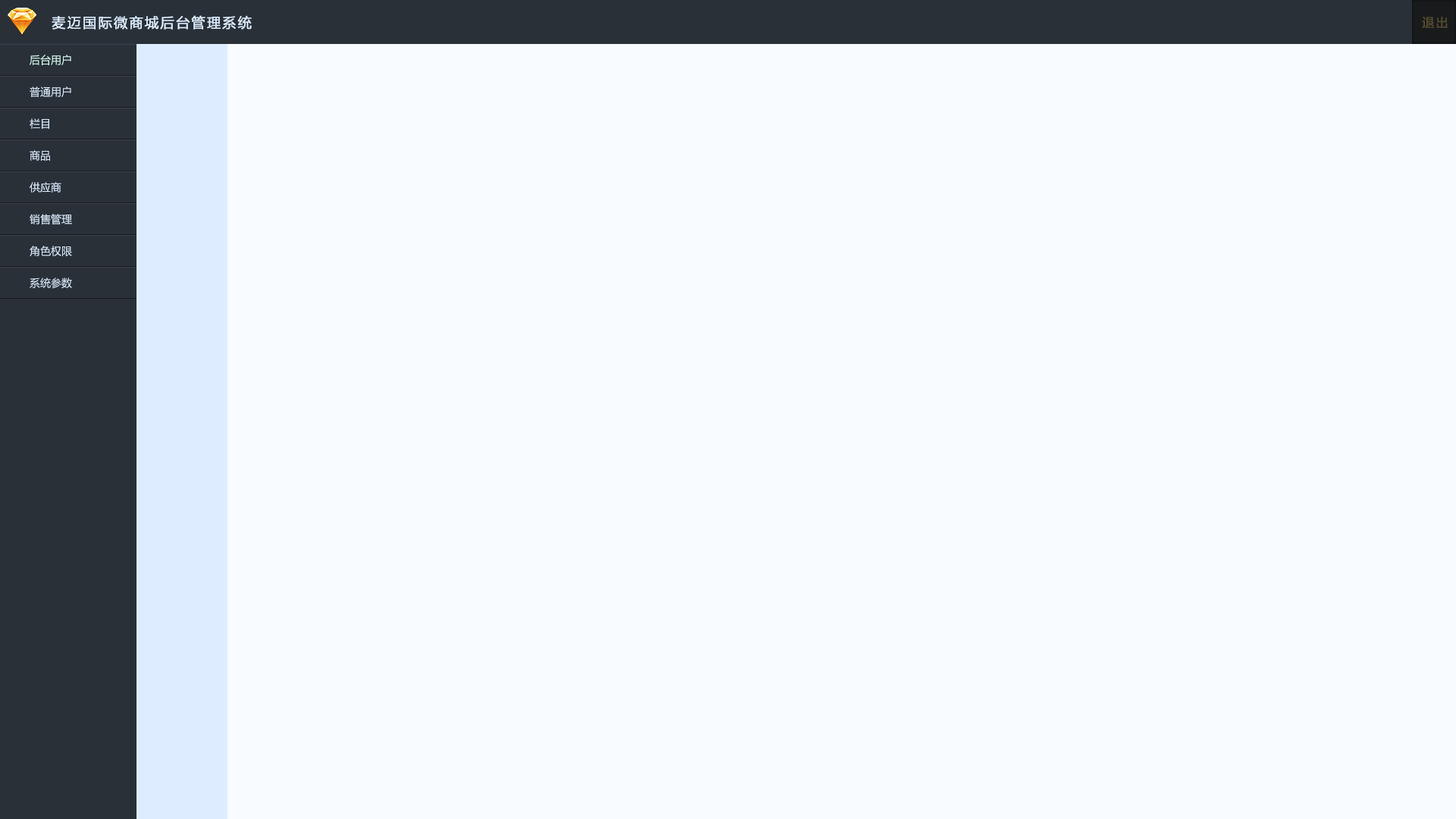
<style>
.page{position:relative;width:1456px;height:819px;background:#f8fbff}
.page>*{position:absolute;margin:0}
.t1{font:13.6px "MicrosoftYaHei";letter-spacing:0.11em;color:#ddedff;font-weight:bold}
.t2{font:12.1px "MicrosoftYaHei";letter-spacing:0.11em;color:#564c30;font-weight:bold}
.t3{font:10.6px/31.8px "MicrosoftYaHei";color:#ddedff}
.t4{font:10.6px "MicrosoftYaHei";color:#ddedff}
</style>
<div class="page">
<p class="t1" style="left:52px;top:15px;width:200px;height:15px">麦迈国际微商城后台管理系统</p>
<p class="t2" style="left:1422px;top:17px;width:26px;height:11px">退出</p>
<p class="t2" style="left:1422px;top:17px;width:26px;height:11px">退出</p>
<p class="t3" style="left:30px;top:55px;width:42px;height:233px">后台用户<br>普通用户<br>栏目<br>商品<br>供应商<br>销售管理<br>角色权限<br>系统参数</p>
<p class="t4" style="left:30px;top:55px;width:41px;height:10px">后台用户</p>
</div>
